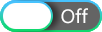
<style>
.page{position:relative;width:102px;height:32px;background:#ffffff}
.page>*{position:absolute;margin:0}
.t1{font:18px "MicrosoftYaHei";color:#ffffff}
</style>
<div class="page">
<p class="t1" style="left:61px;top:8px;width:27px;height:16px">Off</p>
</div>
